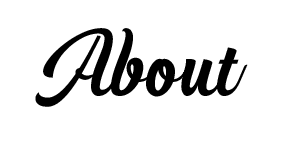
<style>
.page{position:relative;width:300px;height:150px;background:#ffffff}
.page>*{position:absolute;margin:0}
.t1{font:80px "Handycheera";color:#000000}
</style>
<div class="page">
<p class="t1" style="left:35px;top:28px;width:213px;height:79px">About</p>
</div>
